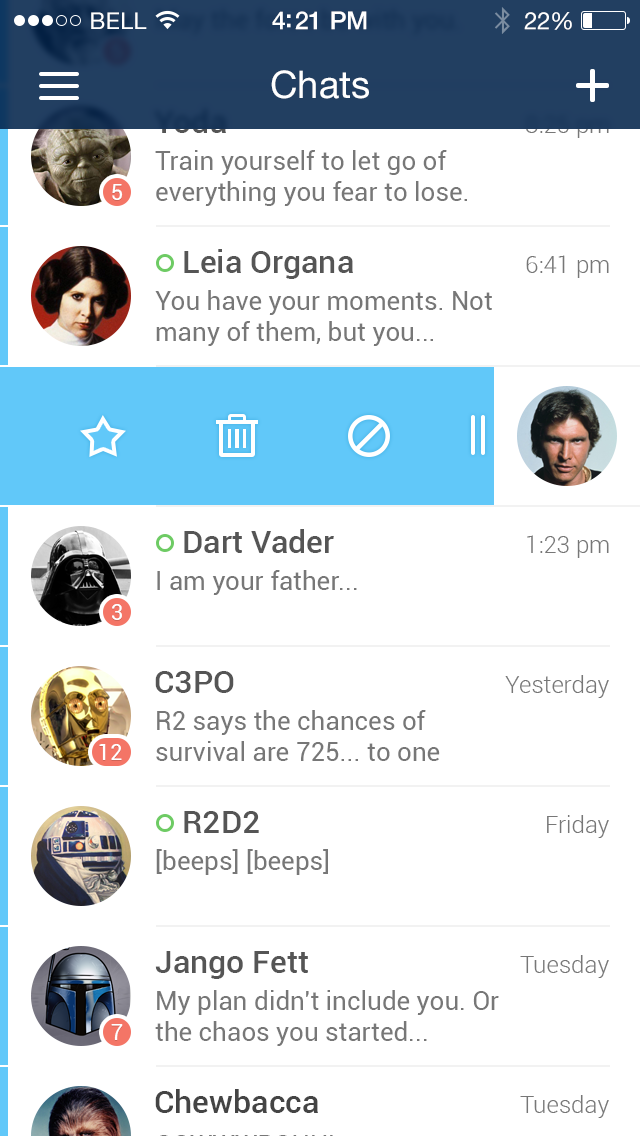
<style>
.page{position:relative;width:640px;height:1136px;background:#ffffff}
.page>*{position:absolute;margin:0}
.t1{font:23px "HelveticaNeue";letter-spacing:0.02em;color:#ffffff}
.t2{font:25px "HelveticaNeue-Medium";letter-spacing:-0.02em;color:#ffffff}
.t3{font:24px "HelveticaNeue";letter-spacing:-0.02em;color:#ffffff}
.t4{font:38px "HelveticaNeueLTPro-Roman";color:#ffffff}
.t5{font:26px "Roboto-Regular";color:#777777}
.t6{font:22px "Roboto-Regular";color:#ffffff}
.t7{font:32px "Roboto-Medium";color:#555555}
.t8{font:24px "Roboto-Light";color:#777777}
.t9{font:32px "Roboto-Medium";color:#444444}
</style>
<div class="page">
<p class="t1" style="left:91px;top:12px;width:56px;height:17px">BELL</p>
<p class="t2" style="left:272px;top:11px;width:95px;height:19px">4:21 PM</p>
<p class="t3" style="left:524px;top:12px;width:48px;height:18px">22%</p>
<p class="t4" style="left:271px;top:70px;width:98px;height:29px">Chats</p>
<p class="t5" style="left:155px;top:150px;width:312px;height:56px">Train yourself to let go of <br>everything you fear to lose.</p>
<p class="t6" style="left:112px;top:184px;width:11px;height:16px">5</p>
<p class="t7" style="left:184px;top:249px;width:169px;height:30px">Leia Organa</p>
<p class="t8" style="left:526px;top:255px;width:83px;height:23px">6:41 pm</p>
<p class="t5" style="left:155px;top:290px;width:337px;height:56px">You have your moments. Not <br>many of them, but you...</p>
<p class="t7" style="left:184px;top:529px;width:150px;height:24px">Dart Vader</p>
<p class="t8" style="left:527px;top:535px;width:82px;height:23px">1:23 pm</p>
<p class="t5" style="left:157px;top:570px;width:200px;height:25px">I am your father...</p>
<p class="t6" style="left:112px;top:604px;width:10px;height:16px">3</p>
<p class="t7" style="left:155px;top:671px;width:79px;height:22px">C3PO</p>
<p class="t8" style="left:505px;top:675px;width:104px;height:23px">Yesterday</p>
<p class="t5" style="left:156px;top:710px;width:284px;height:51px">R2 says the chances of <br>survival are 725... to one</p>
<p class="t6" style="left:99px;top:744px;width:23px;height:16px">12</p>
<p class="t7" style="left:184px;top:811px;width:75px;height:22px">R2D2</p>
<p class="t8" style="left:547px;top:815px;width:62px;height:23px">Friday</p>
<p class="t5" style="left:156px;top:849px;width:172px;height:26px">[beeps] [beeps]</p>
<p class="t7" style="left:155px;top:951px;width:153px;height:28px">Jango Fett</p>
<p class="t8" style="left:520px;top:955px;width:89px;height:23px">Tuesday</p>
<p class="t5" style="left:155px;top:990px;width:344px;height:56px">My plan didn't include you. Or <br>the chaos you started...</p>
<p class="t6" style="left:111px;top:1024px;width:12px;height:16px">7</p>
<p class="t9" style="left:155px;top:1089px;width:163px;height:24px">Chewbacca</p>
<p class="t8" style="left:520px;top:1095px;width:89px;height:23px">Tuesday</p>
</div>
